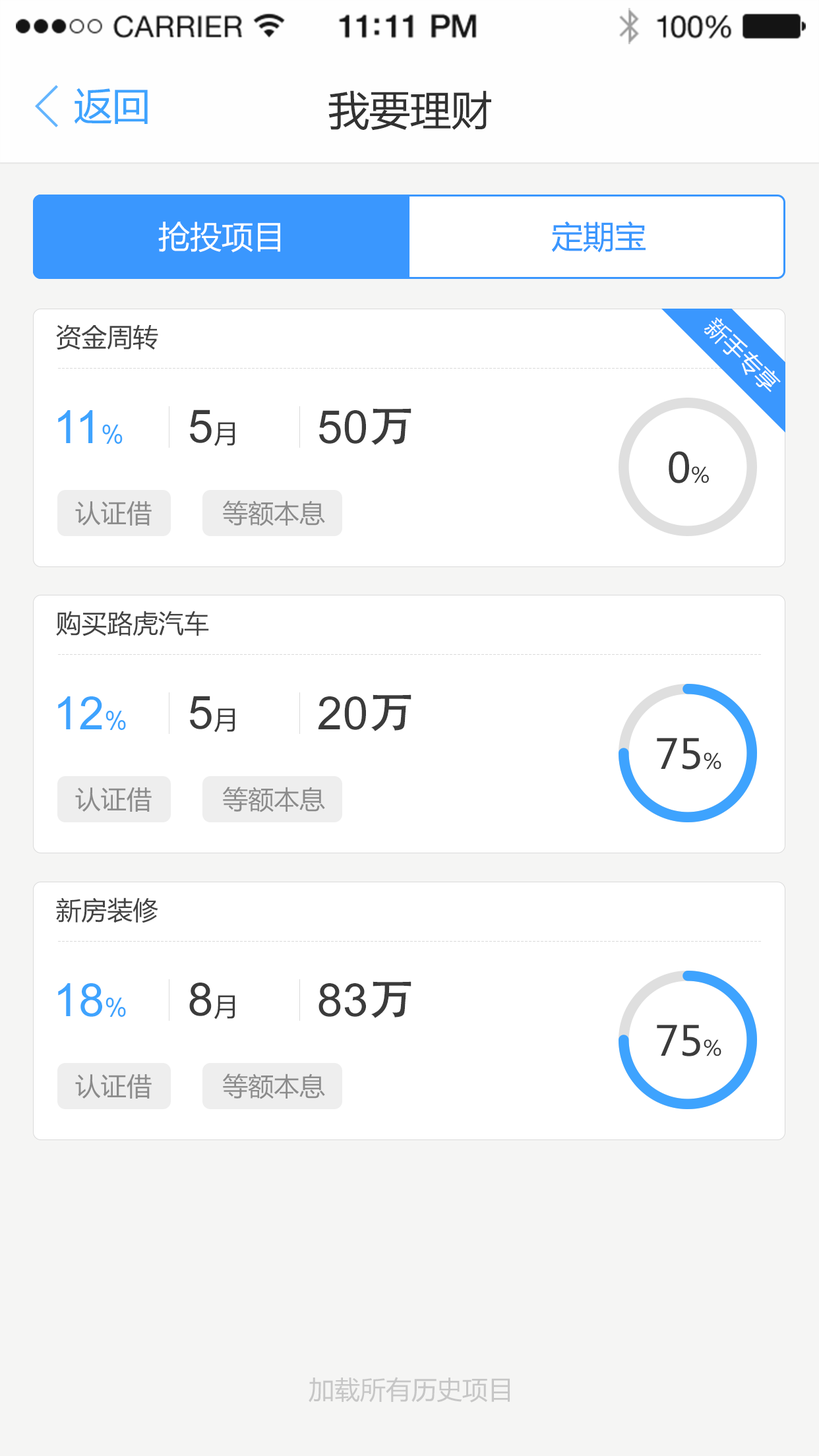
<style>
.page{position:relative;width:819px;height:1456px;background:#ffffff}
.page>*{position:absolute;margin:0}
.t1{font:38.2px "MicrosoftYaHei";color:#3ea3fe}
.t2{font:40.9px "MicrosoftYaHei";color:#323232}
.t3{font:31.7px "MicrosoftYaHei";color:#ffffff}
.t4{font:31.7px "MicrosoftYaHei";color:#3a97fe}
.t5{font:23.1px "MicrosoftYaHei";color:#ffffff}
.t6{font:25.6px "MicrosoftYaHei";color:#434343}
.t7{font:46.1px "ArialMT";color:#3ea3fe}
.t8{font:25.6px "ArialMT";color:#3ea3fe}
.t9{font:46.1px "ArialMT";color:#3b3b3b}
.t10{font:25.6px "MicrosoftYaHei";color:#3b3b3b}
.t11{font:46.1px "AdobeHeitiStd-Regular";color:#3b3b3b}
.t12{font:40.9px "MicrosoftYaHei";color:#3b3b3b}
.t13{font:21.1px "MicrosoftYaHei";color:#3b3b3b}
.t14{font:25.6px "MicrosoftYaHei";color:#8b8b8b}
.t15{font:25.6px "MicrosoftYaHei";color:#c6c6c6}
</style>
<div class="page">
<p class="t1" style="left:74px;top:88px;width:74px;height:36px">返回</p>
<p class="t2" style="left:328px;top:90px;width:163px;height:41px">我要理财</p>
<p class="t3" style="left:158px;top:222px;width:122px;height:31px">抢投项目</p>
<p class="t4" style="left:551px;top:221px;width:95px;height:32px">定期宝</p>
<p class="t5" style="left:704px;top:317px;width:77px;height:75px;rotate:45deg">新手专享</p>
<p class="t6" style="left:56px;top:324px;width:102px;height:26px">资金周转</p>
<p class="t7" style="left:58px;top:410px;width:65px;height:34px">11<span class="t8">%</span></p>
<p class="t9" style="left:190px;top:409px;width:45px;height:37px">5<span class="t10">月</span></p>
<p class="t9" style="left:319px;top:408px;width:92px;height:37px">50<span class="t11">万</span></p>
<p class="t12" style="left:669px;top:451px;width:40px;height:32px">0<span class="t13">%</span></p>
<p class="t14" style="left:75px;top:501px;width:77px;height:25px">认证借</p>
<p class="t14" style="left:223px;top:500px;width:102px;height:26px">等额本息</p>
<p class="t6" style="left:56px;top:611px;width:153px;height:25px">购买路虎汽车</p>
<p class="t7" style="left:58px;top:696px;width:68px;height:34px">12<span class="t8">%</span></p>
<p class="t9" style="left:190px;top:696px;width:45px;height:37px">5<span class="t10">月</span></p>
<p class="t9" style="left:318px;top:694px;width:93px;height:37px">20<span class="t11">万</span></p>
<p class="t12" style="left:657px;top:738px;width:64px;height:32px">75<span class="t13">%</span></p>
<p class="t14" style="left:75px;top:787px;width:77px;height:25px">认证借</p>
<p class="t14" style="left:223px;top:787px;width:102px;height:25px">等额本息</p>
<p class="t6" style="left:56px;top:897px;width:102px;height:26px">新房装修</p>
<p class="t7" style="left:58px;top:983px;width:68px;height:34px">18<span class="t8">%</span></p>
<p class="t9" style="left:189px;top:983px;width:46px;height:36px">8<span class="t10">月</span></p>
<p class="t9" style="left:318px;top:981px;width:93px;height:37px">83<span class="t11">万</span></p>
<p class="t12" style="left:657px;top:1025px;width:64px;height:31px">75<span class="t13">%</span></p>
<p class="t14" style="left:223px;top:1074px;width:102px;height:25px">等额本息</p>
<p class="t14" style="left:75px;top:1074px;width:77px;height:25px">认证借</p>
<p class="t15" style="left:309px;top:1377px;width:201px;height:26px">加载所有历史项目</p>
</div>
